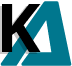
<style>
.page{position:relative;width:72px;height:66px;background:#00778e}
.page>*{position:absolute;margin:0}
.t1{font:67px "OpenSans-Bold";color:#000000}
</style>
<div class="page">
<p class="t1" style="left:2px;top:4px;width:39px;height:48px">K</p>
</div>
